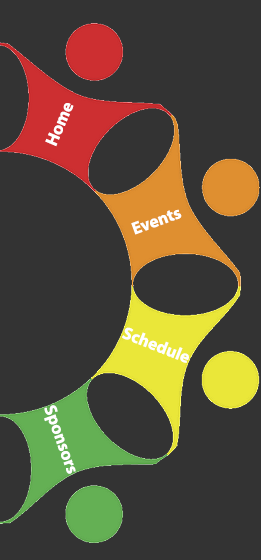
<style>
.page{position:relative;width:261px;height:560px;background:#333333}
.page>*{position:absolute;margin:0}
.t1{font:17.3px "MyriadPro-Bold";color:#ffffff}
</style>
<div class="page">
<p class="t1" style="left:45px;top:103px;width:29px;height:44px;rotate:-67deg">Home</p>
<p class="t1" style="left:131px;top:209px;width:51px;height:26px;rotate:-20deg">Events</p>
<p class="t1" style="left:122px;top:327px;width:67px;height:36px;rotate:22deg">Schedule</p>
<p class="t1" style="left:44px;top:405px;width:32px;height:69px;rotate:70deg">Sponsors</p>
</div>
